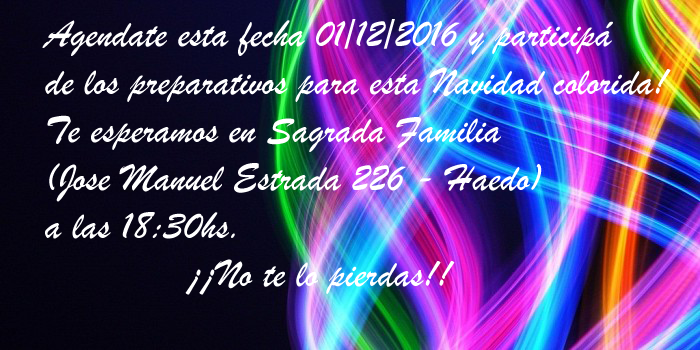
<style>
.page{position:relative;width:700px;height:350px}
.page>*{position:absolute;margin:0}
.t1{font:40px "BrushScriptMT";color:#ffffff}
</style>
<div class="page">
<p class="t1" style="left:42px;top:19px;width:629px;height:276px">Agendate esta fecha 01/12/2016 y participá<br>de los preparativos para esta Navidad colorida!<br>Te esperamos en Sagrada Familia <br>(Jose Manuel Estrada 226 - Haedo) <br>a las 18:30hs.<br>    ¡¡No te lo pierdas!!</p>
</div>
